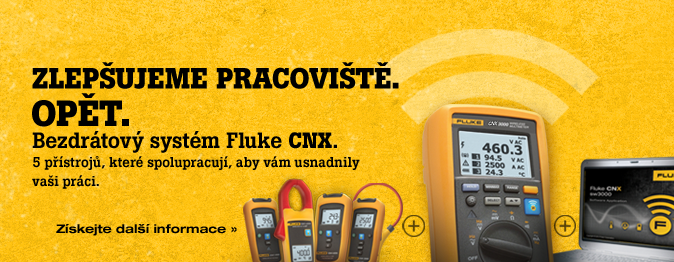
<style>
.page{position:relative;width:674px;height:262px}
.page>*{position:absolute;margin:0}
.t1{font:29px "BotonPro-Bold";letter-spacing:-0.005em;color:#000000;text-transform:uppercase}
.t2{font:36px "BotonPro-Bold";letter-spacing:-0.005em;color:#000000;text-transform:uppercase}
.t3{font:14px/18.8px "BotonPro-Medium";letter-spacing:-0.01em;color:#000000}
.t4{font:22px/18.8px "BotonPro-Medium";letter-spacing:-0.01em;color:#000000}
.t5{font:22px/18.8px "BotonPro-Bold";letter-spacing:-0.01em;color:#000000}
.t6{font:12px "HelveticaNeueLTStd-BdEx";letter-spacing:-0.01em;color:#000000}
</style>
<div class="page">
<p class="t1" style="left:32px;top:62px;width:367px;height:27px">Zlepšujeme pracoviště.</p>
<p class="t2" style="left:32px;top:93px;width:97px;height:34px">Opět.</p>
<p class="t3" style="left:32px;top:131px;width:328px;height:58px"><span class="t4">Bezdrátový systém Fluke </span><span class="t5">CNX</span><span class="t4">.<br></span>5 přístrojů, které spolupracují, aby vám usnadnily vaši práci.</p>
<p class="t6" style="left:56px;top:224px;width:181px;height:12px">Získejte další informace »</p>
</div>
